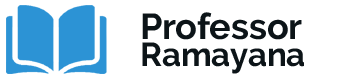
<style>
.page{position:relative;width:339px;height:78px;background:#ffffff}
.page>*{position:absolute;margin:0}
.t1{font:36px "Raleway-Bold";color:#0c1418}
.t2{font:33px "Raleway-Bold";color:#0c1418}
</style>
<div class="page">
<p class="t1" style="left:142px;top:12px;width:160px;height:28px">Professor</p>
<p class="t2" style="left:142px;top:42px;width:162px;height:32px">Ramayana</p>
</div>
